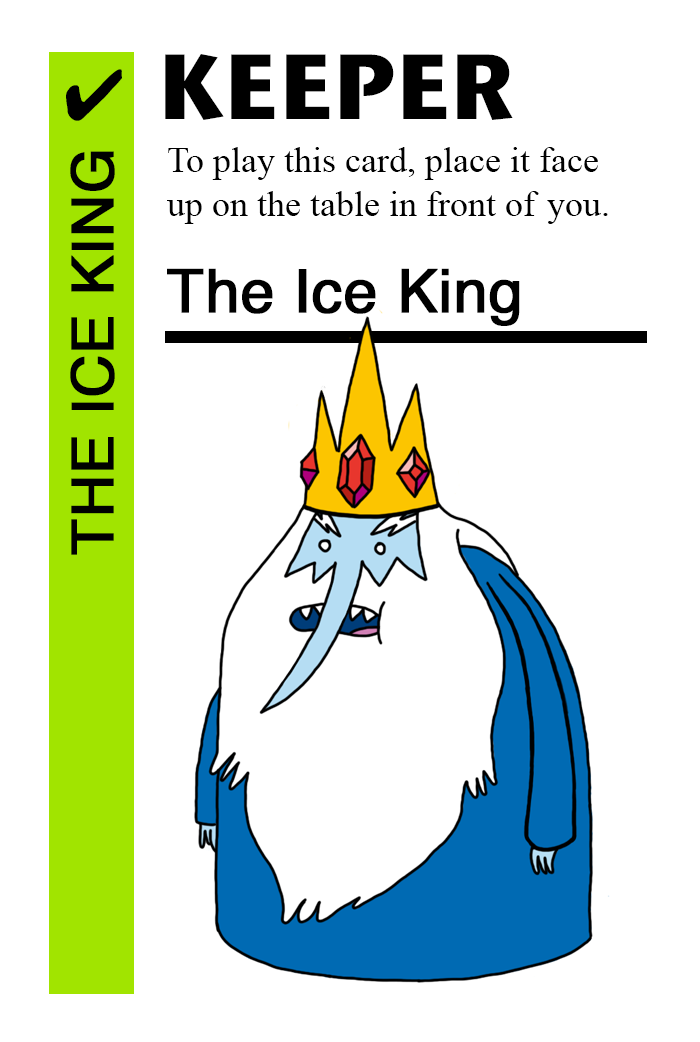
<style>
.page{position:relative;width:700px;height:1042px;background:#ffffff}
.page>*{position:absolute;margin:0}
.t1{font:92px "StoneSansITC-Bold";color:#000000}
.t2{font:72px "MS-Gothic";color:#000000}
.t3{font:36px "TimesNewRomanPSMT";color:#000000}
.t4{font:58px "Helvetica";color:#000000;font-weight:bold}
.t5{font:60px "Helvetica";color:#000000;font-weight:bold}
</style>
<div class="page">
<p class="t1" style="left:165px;top:54px;width:348px;height:66px">KEEPER</p>
<p class="t2" style="left:66px;top:69px;width:56px;height:52px">✔</p>
<p class="t3" style="left:167px;top:147px;width:441px;height:77px">To play this card, place it face<br>up on the table in front of you.</p>
<p class="t4" style="left:70px;top:151px;width:45px;height:404px;rotate:-90deg">THE ICE KING</p>
<p class="t5" style="left:167px;top:268px;width:353px;height:58px">The Ice King</p>
</div>
